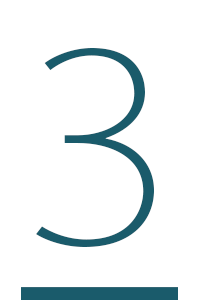
<style>
.page{position:relative;width:200px;height:300px;background:#ffffff}
.page>*{position:absolute;margin:0}
.t1{font:258.8px "KozGoPro-ExtraLight";color:#1a5b6b;text-decoration:underline;scale:1.13 1}
</style>
<div class="page">
<p class="t1" style="left:21px;top:48px;width:157px;height:252px">3</p>
</div>
